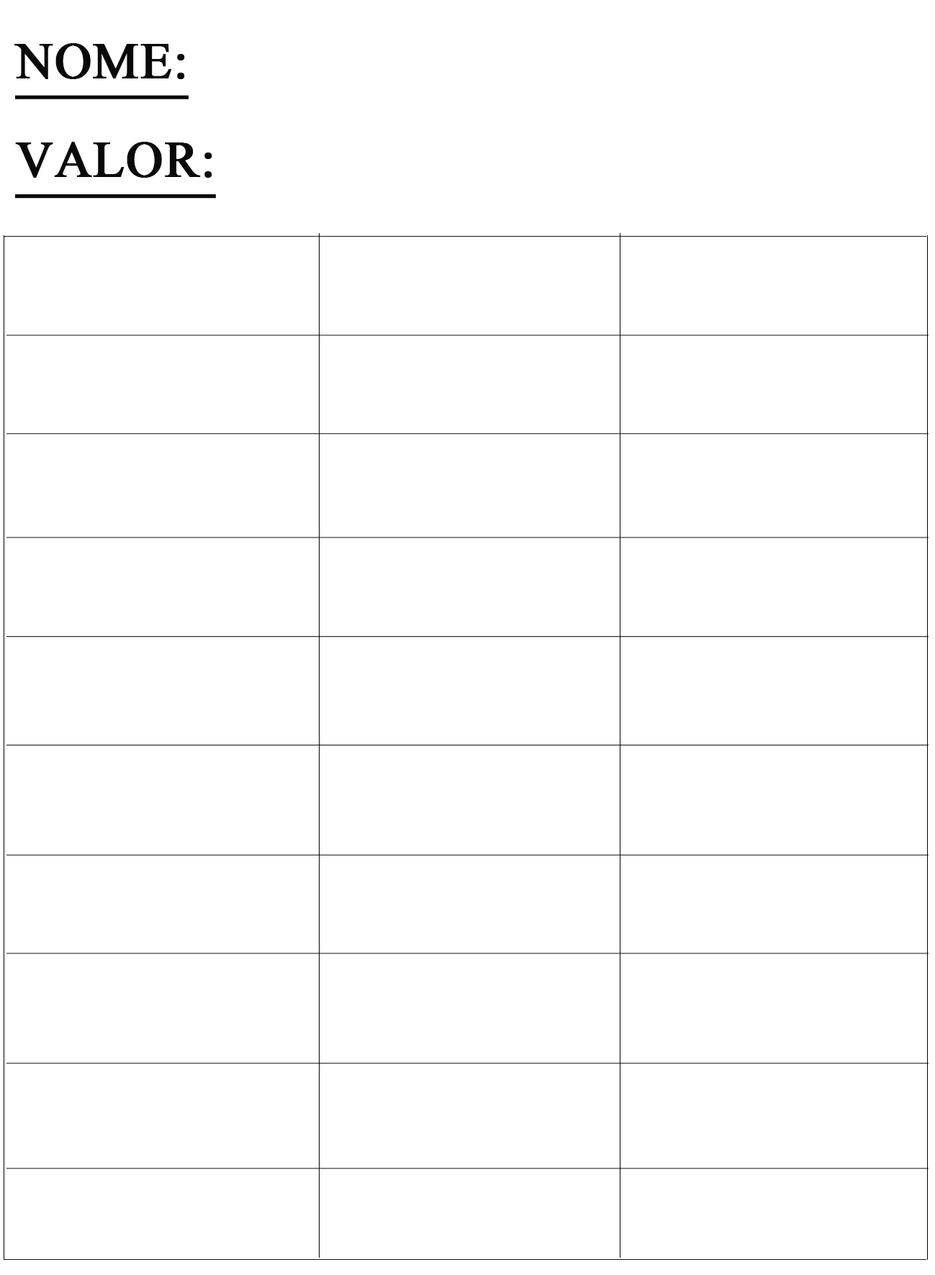
<style>
.page{position:relative;width:935px;height:1275px;background:#ffffff}
.page>*{position:absolute;margin:0}
.t1{font:63.5px/99px "Aparajita";color:#090909;text-transform:uppercase;font-weight:bold;text-decoration:underline}
</style>
<div class="page">
<p class="t1" style="left:14px;top:43px;width:202px;height:156px">NOME:<br>VALOR:</p>
</div>
